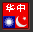
<style>
.page{position:relative;width:33px;height:32px;background:#f20000}
.page>*{position:absolute;margin:0}
.t1{font:10.4px "SimSun";color:#ffffff}
</style>
<div class="page">
<p class="t1" style="left:6px;top:4px;width:19px;height:8px">华中</p>
</div>
